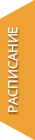
<style>
.page{position:relative;width:35px;height:140px;background:#eea236}
.page>*{position:absolute;margin:0}
.t1{font:12.4px "OpenSans";color:#ffffff;scale:1.05 1}
</style>
<div class="page">
<p class="t1" style="left:8px;top:27px;width:10px;height:85px;rotate:-90deg">РАСПИСАНИЕ</p>
</div>
